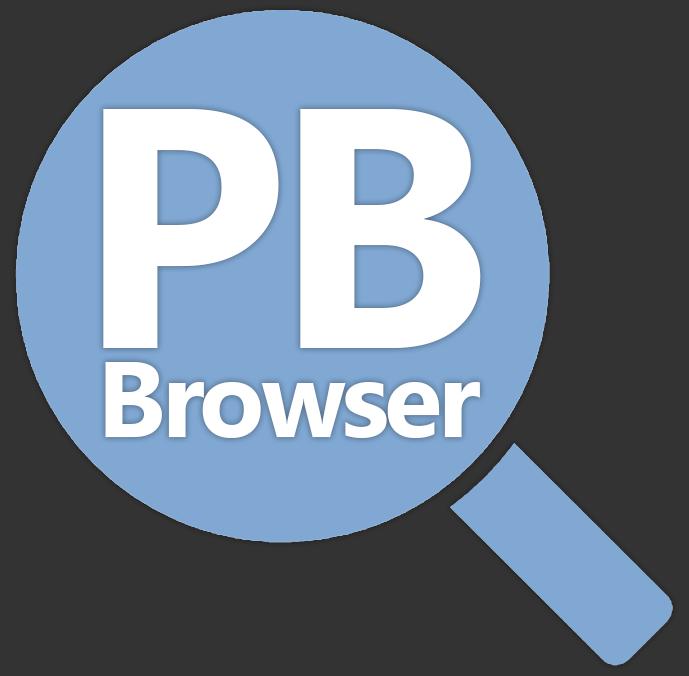
<style>
.page{position:relative;width:689px;height:676px;background:#333333}
.page>*{position:absolute;margin:0}
.t1{font:107px/89px "SegoeUI-Bold";letter-spacing:-0.04em;color:#ffffff}
.t2{font:342px/89px "SegoeUI-Bold";letter-spacing:-0.04em;color:#ffffff}
</style>
<div class="page">
<p class="t1" style="left:103px;top:109px;width:378px;height:329px;text-align:center"><span class="t2">PB</span><br>Browser</p>
</div>
